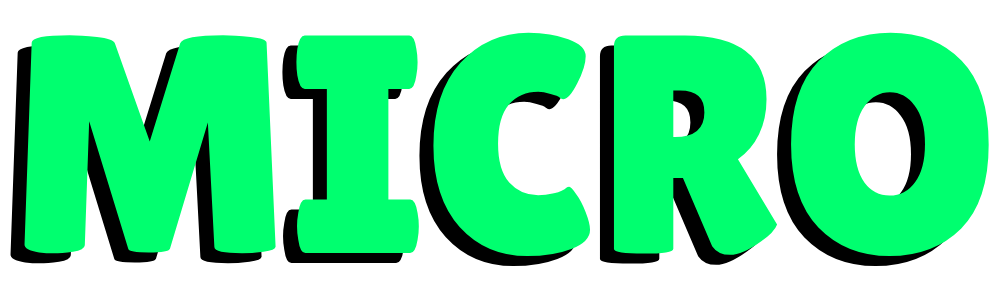
<style>
.page{position:relative;width:1000px;height:300px;background:#00ff6f}
.page>*{position:absolute;margin:0}
.t1{font:310.7px "LilitaOne";color:#00ff6f}
</style>
<div class="page">
<p class="t1" style="left:24px;top:32px;width:965px;height:225px">MICRO</p>
<p class="t1" style="left:10px;top:42px;width:965px;height:225px">MICRO</p>
</div>
